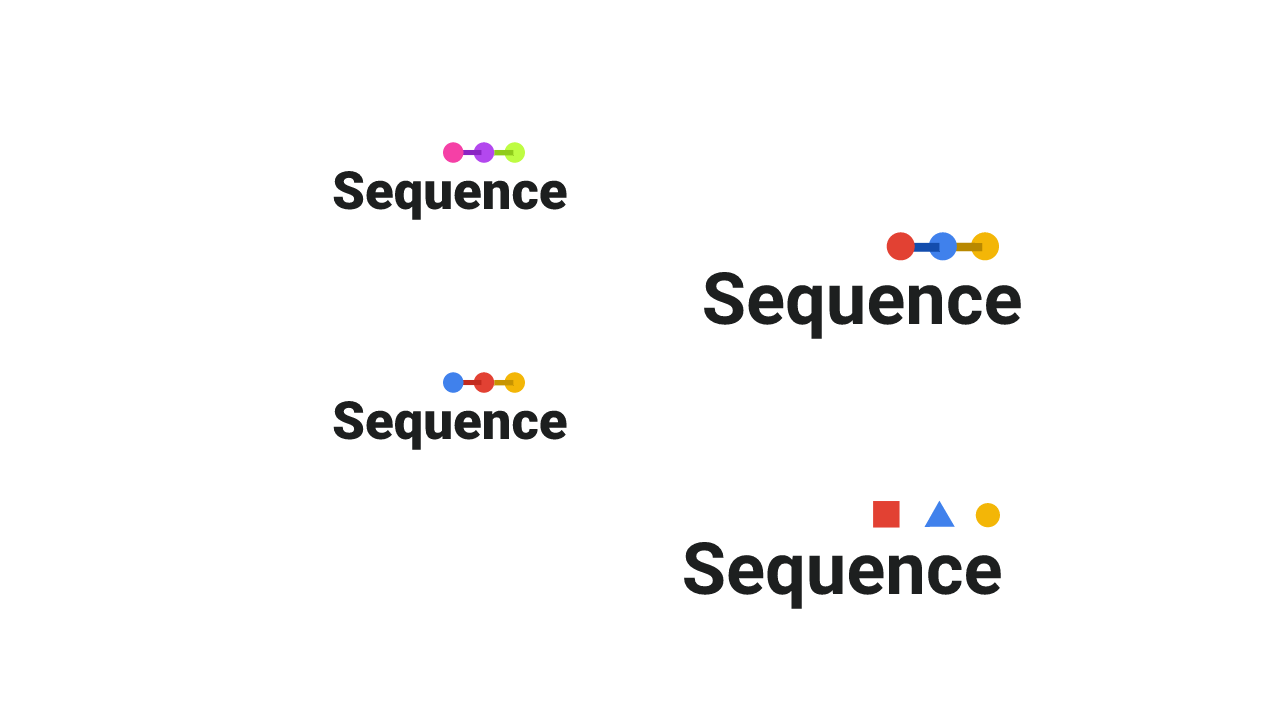
<style>
.page{position:relative;width:1280px;height:720px;background:#ffffff}
.page>*{position:absolute;margin:0}
.t1{font:52.7px "Roboto-Black";color:#1d1f1f}
.t2{font:72.2px "Roboto-Bold";color:#1d1f1f}
</style>
<div class="page">
<p class="t1" style="left:333px;top:171px;width:234px;height:49px">Sequence</p>
<p class="t2" style="left:704px;top:272px;width:317px;height:67px">Sequence</p>
<p class="t1" style="left:333px;top:401px;width:234px;height:49px">Sequence</p>
<p class="t2" style="left:684px;top:542px;width:317px;height:67px">Sequence</p>
</div>
